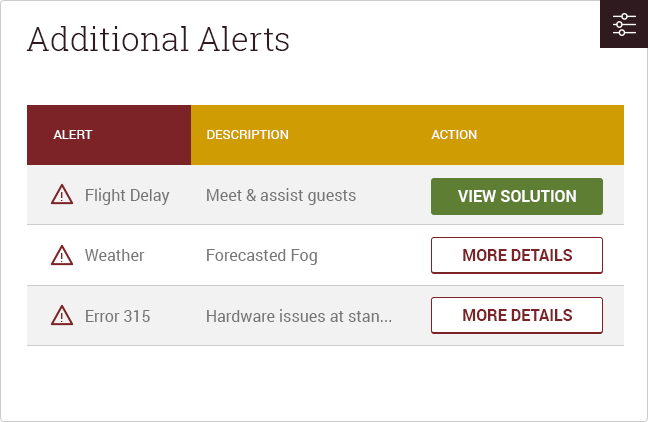
<style>
.page{position:relative;width:648px;height:422px;background:#ffffff}
.page>*{position:absolute;margin:0}
.t1{font:33px "RobotoSlab-Light";color:#2f1b1f}
.t2{font:13px "Roboto-Regular";color:#ffffff;text-transform:uppercase}
.t3{font:13.3px "Roboto-Regular";color:#7b2326}
.t4{font:16px "Roboto-Regular";color:#767676}
.t5{font:16px "Roboto-Bold";color:#fffefe;text-transform:uppercase}
.t6{font:16px "Roboto-Bold";color:#7b2326;text-transform:uppercase}
</style>
<div class="page">
<p class="t1" style="left:26px;top:26px;width:263px;height:25px">Additional Alerts</p>
<p class="t2" style="left:53px;top:130px;width:40px;height:9px">Alert</p>
<p class="t2" style="left:207px;top:130px;width:81px;height:9px">Description</p>
<p class="t2" style="left:431px;top:130px;width:46px;height:9px">Action</p>
<p class="t3" style="left:61px;top:192px;width:2px;height:9px">!</p>
<p class="t4" style="left:86px;top:188px;width:84px;height:17px">Flight Delay</p>
<p class="t4" style="left:207px;top:188px;width:149px;height:17px">Meet &amp; assist guests</p>
<p class="t5" style="left:458px;top:190px;width:118px;height:12px">View Solution</p>
<p class="t3" style="left:61px;top:253px;width:2px;height:9px">!</p>
<p class="t4" style="left:85px;top:249px;width:60px;height:12px">Weather</p>
<p class="t4" style="left:207px;top:249px;width:110px;height:16px">Forecasted Fog</p>
<p class="t6" style="left:463px;top:249px;width:109px;height:12px">More details</p>
<p class="t3" style="left:61px;top:313px;width:2px;height:9px">!</p>
<p class="t4" style="left:86px;top:310px;width:64px;height:12px">Error 315</p>
<p class="t4" style="left:207px;top:309px;width:185px;height:13px">Hardware issues at stan...</p>
<p class="t6" style="left:463px;top:309px;width:109px;height:12px">More details</p>
</div>
